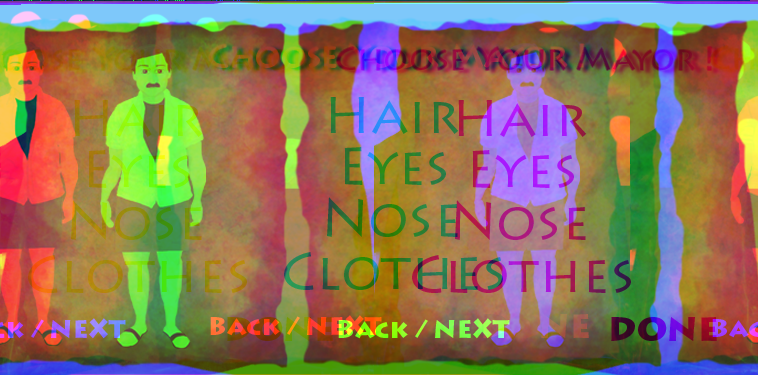
<style>
.page{position:relative;width:758px;height:375px}
.page>*{position:absolute;margin:0}
.t1{font:52.3px "LithosPro-Regular"}
.t2{font:25.6px "LithosPro-Black"}
.t3{font:33.9px "LithosPro-Black"}
</style>
<div class="page">
<p class="t1" style="left:458px;top:96px;width:129px;height:37px">Hair</p>
<p class="t1" style="left:472px;top:146px;width:102px;height:38px">Eyes</p>
<p class="t1" style="left:455px;top:196px;width:131px;height:40px">Nose</p>
<p class="t1" style="left:412px;top:251px;width:219px;height:38px">Clothes</p>
<p class="t2" style="left:338px;top:314px;width:172px;height:21px">Back / NEXT</p>
<p class="t3" style="left:611px;top:313px;width:106px;height:24px">DONE</p>
</div>
